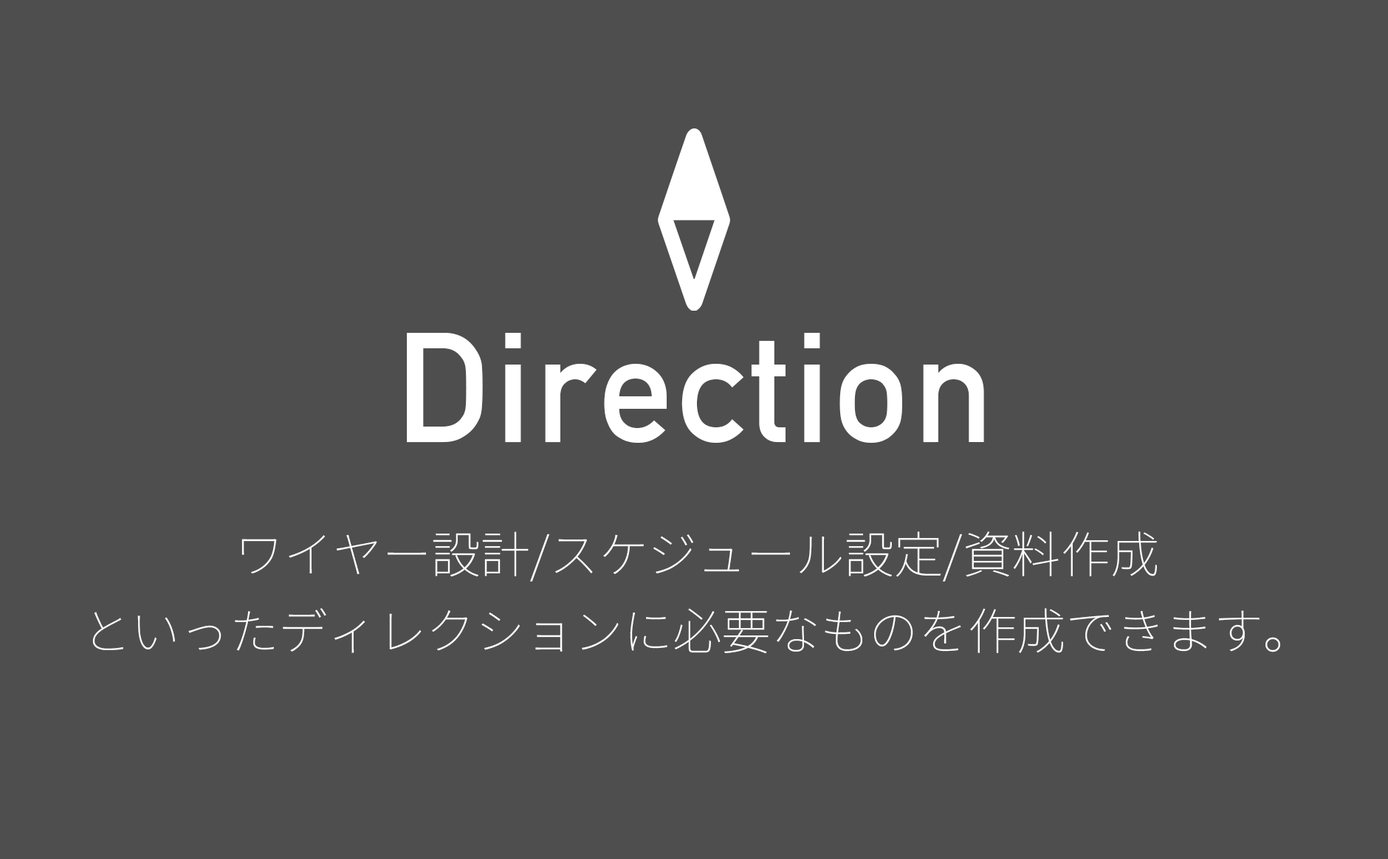
<style>
.page{position:relative;width:1388px;height:859px;background:#4e4e4e}
.page>*{position:absolute;margin:0}
.t1{font:153.2px "DINAlternate-Bold";letter-spacing:0.02em;color:#ffffff}
.t2{font:49.2px/76.9px "NotoSansJP-Thin";color:#ffffff}
</style>
<div class="page">
<p class="t1" style="left:407px;top:333px;width:577px;height:110px">Direction</p>
<p class="t2" style="left:92px;top:531px;width:1188px;height:123px;text-align:center">ワイヤー設計/スケジュール設定/資料作成<br>といったディレクションに必要なものを作成できます。</p>
</div>
